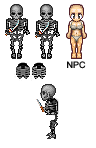
<style>
.page{position:relative;width:96px;height:148px;background:#ffffff}
.page>*{position:absolute;margin:0}
.t1{font:9px "ArialMT";color:#0c0c0c}
</style>
<div class="page">
<p class="t1" style="left:67px;top:61px;width:19px;height:8px">NPC</p>
</div>
